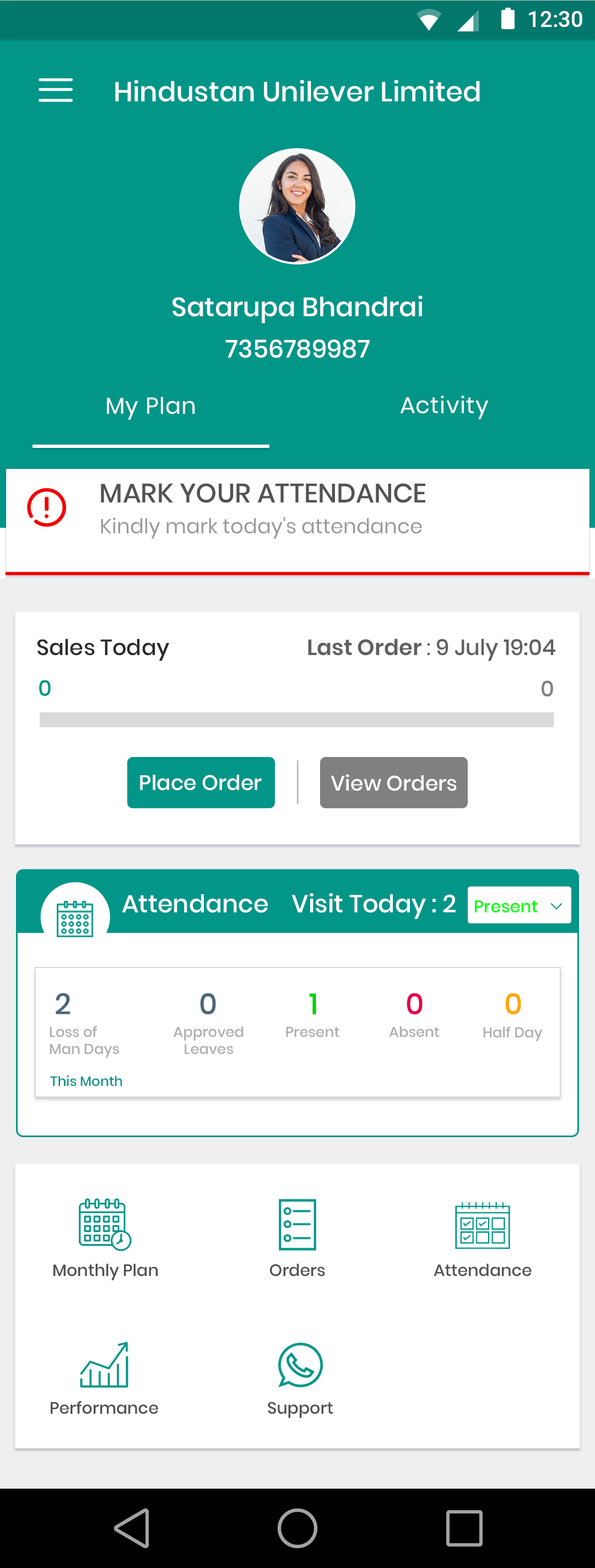
<style>
.page{position:relative;width:595px;height:1568px;background:#ffffff}
.page>*{position:absolute;margin:0}
.t1{font:22.7px "Roboto-Medium";color:#ffffff}
.t2{font:27.5px "Poppins-Medium";color:#ffffff}
.t3{font:26.4px "Poppins-Medium";color:#ffffff}
.t4{font:24.8px "Poppins-Medium";color:#ffffff}
.t5{font:23px "Poppins-Regular";letter-spacing:0.025em;color:#ffffff}
.t6{font:23px "Poppins-Regular";letter-spacing:0.025em;color:#fffefe}
.t7{font:26.7px "Poppins-Medium";color:#535353;text-transform:uppercase}
.t8{font:20.4px "Poppins-Regular";color:#999999}
.t9{font:22px "Poppins-Medium";color:#2b2b2b}
.t10{font:22px "Poppins-Medium";color:#606060}
.t11{font:22px "Poppins-SemiBold";color:#606060}
.t12{font:22px "Poppins-Regular";color:#606060}
.t13{font:22px "Poppins-Medium";color:#029688}
.t14{font:22px "Poppins-Medium";color:#828282}
.t15{font:20.9px "Poppins-Medium";color:#ffffff}
.t16{font:24.6px "Poppins-Medium";color:#ffffff}
.t17{font:16.9px "Poppins-Medium";color:#00ff00}
.t18{font:29.5px "Poppins-Medium";color:#4b677a}
.t19{font:29.5px "Poppins-Medium";color:#02d202}
.t20{font:29.5px "Poppins-Medium";color:#e50049}
.t21{font:29.5px "Poppins-Medium";color:#ffa601}
.t22{font:14.3px "Poppins-Medium";color:#adadad}
.t23{font:13.5px "Poppins-Medium";color:#029688}
.t24{font:16.5px "Poppins-Medium";color:#505050}
</style>
<div class="page">
<p class="t1" style="left:529px;top:11px;width:53px;height:16px">12:30</p>
<p class="t2" style="left:115px;top:80px;width:365px;height:22px">Hindustan Unilever Limited</p>
<p class="t3" style="left:172px;top:295px;width:251px;height:28px">Satarupa Bhandrai</p>
<p class="t4" style="left:225px;top:339px;width:145px;height:19px">7356789987</p>
<p class="t5" style="left:107px;top:397px;width:88px;height:23px">My Plan</p>
<p class="t6" style="left:400px;top:396px;width:89px;height:23px">Activity</p>
<p class="t7" style="left:101px;top:483px;width:324px;height:20px">Mark Your Attendance</p>
<p class="t8" style="left:101px;top:517px;width:321px;height:22px">Kindly mark today's attendance</p>
<p class="t9" style="left:37px;top:639px;width:132px;height:22px">Sales Today</p>
<p class="t10" style="left:308px;top:639px;width:248px;height:22px"><span class="t11">Last Order </span><span class="t12">: </span>9 July 19:04</p>
<p class="t13" style="left:39px;top:680px;width:12px;height:16px">0</p>
<p class="t14" style="left:542px;top:680px;width:11px;height:16px">0</p>
<p class="t15" style="left:140px;top:775px;width:122px;height:16px">Place Order</p>
<p class="t15" style="left:331px;top:774px;width:126px;height:17px">View Orders</p>
<p class="t16" style="left:122px;top:893px;width:415px;height:26px">Attendance    Visit Today : 2   <span class="t17">Present</span></p>
<p class="t18" style="left:56px;top:993px;width:15px;height:21px">2</p>
<p class="t18" style="left:200px;top:993px;width:16px;height:21px">0</p>
<p class="t19" style="left:309px;top:993px;width:7px;height:21px">1</p>
<p class="t20" style="left:407px;top:993px;width:16px;height:21px">0</p>
<p class="t21" style="left:505px;top:993px;width:16px;height:21px">0</p>
<p class="t22" style="left:50px;top:1026px;width:69px;height:32px">Loss of<br>Man Days</p>
<p class="t22" style="left:174px;top:1026px;width:70px;height:29px;text-align:center">Approved<br>Leaves</p>
<p class="t22" style="left:389px;top:1026px;width:50px;height:11px">Absent</p>
<p class="t22" style="left:286px;top:1026px;width:53px;height:11px">Present</p>
<p class="t22" style="left:483px;top:1026px;width:60px;height:15px">Half Day</p>
<p class="t23" style="left:50px;top:1075px;width:72px;height:11px">This Month</p>
<p class="t24" style="left:53px;top:1263px;width:105px;height:17px">Monthly Plan</p>
<p class="t24" style="left:270px;top:1263px;width:55px;height:14px">Orders</p>
<p class="t24" style="left:434px;top:1263px;width:98px;height:14px">Attendance</p>
<p class="t24" style="left:51px;top:1401px;width:107px;height:13px">Performance</p>
<p class="t24" style="left:268px;top:1402px;width:65px;height:16px">Support</p>
</div>
